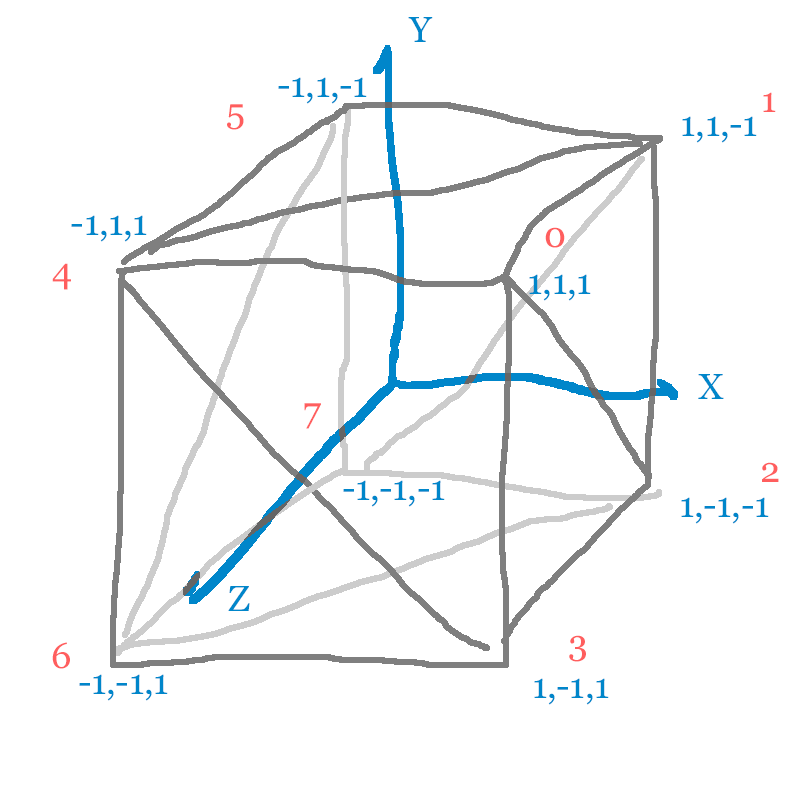
<style>
.page{position:relative;width:800px;height:800px;background:#ffffff}
.page>*{position:absolute;margin:0}
.t1{font:36px "Georgia";letter-spacing:-0.01em;color:#0086ca}
.t2{font:36px "Georgia";letter-spacing:-0.01em;color:#ff5e5e}
</style>
<div class="page">
<p class="t1" style="left:408px;top:17px;width:25px;height:25px">Y</p>
<p class="t1" style="left:278px;top:77px;width:89px;height:27px">-1,1,-1</p>
<p class="t2" style="left:763px;top:92px;width:13px;height:20px">1</p>
<p class="t2" style="left:227px;top:104px;width:17px;height:26px">5</p>
<p class="t1" style="left:682px;top:116px;width:75px;height:27px">1,1,-1</p>
<p class="t1" style="left:71px;top:215px;width:76px;height:27px">-1,1,1</p>
<p class="t2" style="left:545px;top:227px;width:20px;height:21px">0</p>
<p class="t2" style="left:52px;top:263px;width:19px;height:27px">4</p>
<p class="t1" style="left:529px;top:274px;width:62px;height:27px">1,1,1</p>
<p class="t1" style="left:698px;top:374px;width:26px;height:25px">X</p>
<p class="t2" style="left:304px;top:403px;width:17px;height:26px">7</p>
<p class="t2" style="left:762px;top:462px;width:17px;height:20px">2</p>
<p class="t1" style="left:343px;top:480px;width:102px;height:27px">-1,-1,-1</p>
<p class="t1" style="left:681px;top:497px;width:88px;height:27px">1,-1,-1</p>
<p class="t1" style="left:228px;top:586px;width:22px;height:25px">Z</p>
<p class="t2" style="left:569px;top:635px;width:17px;height:27px">3</p>
<p class="t2" style="left:52px;top:642px;width:18px;height:27px">6</p>
<p class="t1" style="left:79px;top:674px;width:89px;height:27px">-1,-1,1</p>
<p class="t1" style="left:534px;top:678px;width:75px;height:27px">1,-1,1</p>
</div>
